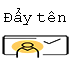
<style>
.page{position:relative;width:71px;height:58px;background:#ffffff}
.page>*{position:absolute;margin:0}
.t1{font:16px "CourierNewPSMT";color:#000000}
</style>
<div class="page">
<p class="t1" style="left:4px;top:8px;width:62px;height:17px">Đẩy tên</p>
</div>
